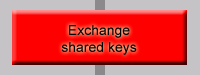
<style>
.page{position:relative;width:200px;height:75px;background:#c6c3c6}
.page>*{position:absolute;margin:0}
.t1{font:14px "ArialMT";color:#000000}
</style>
<div class="page">
<p class="t1" style="left:61px;top:25px;width:76px;height:30px;text-align:center">Exchange<br>shared keys</p>
</div>
